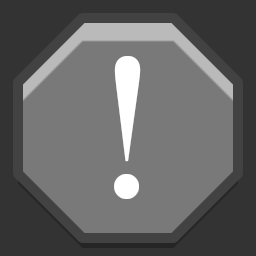
<style>
.page{position:relative;width:256px;height:256px;background:#797979}
.page>*{position:absolute;margin:0}
.t1{font:210.9px "BaskOldFace";letter-spacing:-0.02em;color:#ffffff}
</style>
<div class="page">
<p class="t1" style="left:114px;top:56px;width:27px;height:143px">!</p>
</div>
